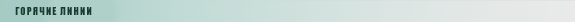
<style>
.page{position:relative;width:575px;height:22px}
.page>*{position:absolute;margin:0}
.t1{font:10px "Impact";letter-spacing:0.1em;color:#183b31}
</style>
<div class="page">
<p class="t1" style="left:15px;top:7px;width:77px;height:8px">ГОРЯЧИЕ ЛИНИИ</p>
</div>
